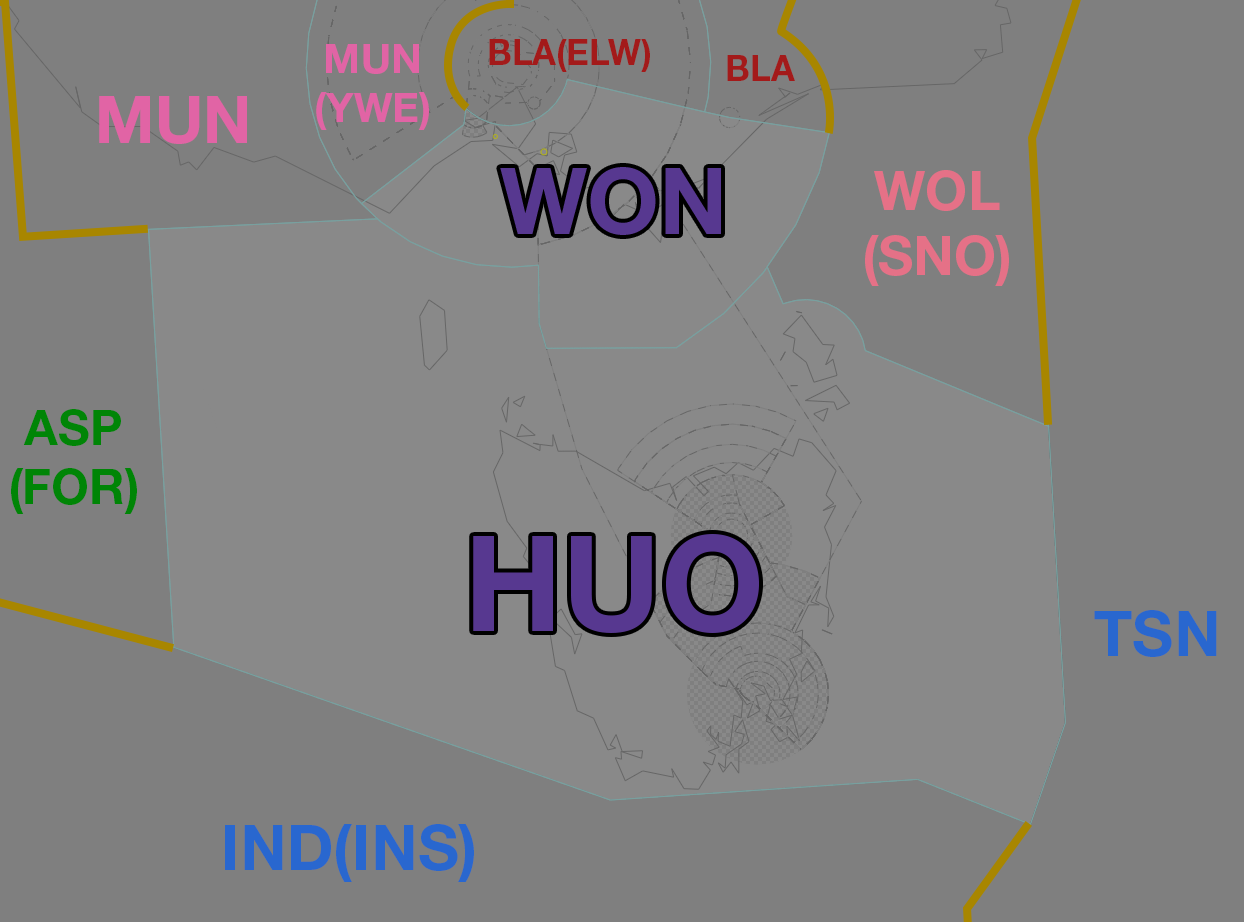
<style>
.page{position:relative;width:1244px;height:922px;background:#7f7f7f}
.page>*{position:absolute;margin:0}
.t1{font:35.3px "HelveticaNeueLTStd-Bd";color:#a31a1a}
.t2{font:40.9px "HelveticaNeueLTStd-Bd";color:#e164a5}
.t3{font:65.8px "HelveticaNeueLTStd-Bd";color:#e164a5}
.t4{font:92.6px "HelveticaNeueLTStd-Bd";color:#573890}
.t5{font:54.3px "HelveticaNeueLTStd-Bd";color:#e57187}
.t6{font:48.9px "HelveticaNeueLTStd-Bd";color:#008506}
.t7{font:132.9px "HelveticaNeueLTStd-Bd";color:#573890}
.t8{font:63.3px "HelveticaNeueLTStd-Bd";color:#2967cf}
</style>
<div class="page">
<p class="t1" style="left:489px;top:39px;width:161px;height:33px">BLA(ELW)</p>
<p class="t2" style="left:316px;top:44px;width:113px;height:86px;text-align:center">MUN<br>(YWE)</p>
<p class="t1" style="left:727px;top:55px;width:68px;height:26px">BLA</p>
<p class="t3" style="left:99px;top:96px;width:148px;height:48px">MUN</p>
<p class="t4" style="left:500px;top:167px;width:221px;height:68px">WON</p>
<p class="t5" style="left:865px;top:170px;width:144px;height:116px;text-align:center">WOL<br>(SNO)</p>
<p class="t6" style="left:11px;top:409px;width:126px;height:105px;text-align:center">ASP<br>(FOR)</p>
<p class="t7" style="left:473px;top:534px;width:286px;height:99px">HUO</p>
<p class="t8" style="left:1094px;top:610px;width:123px;height:47px">TSN</p>
<p class="t8" style="left:225px;top:824px;width:249px;height:58px">IND(INS)</p>
</div>
